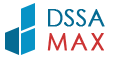
<style>
.page{position:relative;width:118px;height:59px;background:#ffffff}
.page>*{position:absolute;margin:0}
.t1{font:23px "CenturyGothic";color:#056b93;font-weight:bold}
.t2{font:23px "CenturyGothic";letter-spacing:0.1em;color:#cc3333;text-transform:uppercase;font-weight:bold}
</style>
<div class="page">
<p class="t1" style="left:48px;top:9px;width:57px;height:18px">DSSA</p>
<p class="t2" style="left:47px;top:33px;width:57px;height:18px">max</p>
</div>
